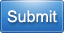
<style>
.page{position:relative;width:64px;height:33px}
.page>*{position:absolute;margin:0}
.t1{font:16px "ArialMT";color:#ffffff}
</style>
<div class="page">
<p class="t1" style="left:7px;top:8px;width:50px;height:19px">Submit</p>
</div>
